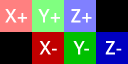
<style>
.page{position:relative;width:128px;height:64px;background:#000000}
.page>*{position:absolute;margin:0}
.t1{font:18px "BellGothicStd-Bold";color:#ffffff}
</style>
<div class="page">
<p class="t1" style="left:5px;top:9px;width:22px;height:14px">X+</p>
<p class="t1" style="left:38px;top:9px;width:22px;height:14px">Y+</p>
<p class="t1" style="left:71px;top:9px;width:21px;height:14px">Z+</p>
<p class="t1" style="left:39px;top:41px;width:18px;height:14px">X-</p>
<p class="t1" style="left:73px;top:41px;width:16px;height:14px">Y-</p>
<p class="t1" style="left:105px;top:41px;width:17px;height:14px">Z-</p>
</div>
